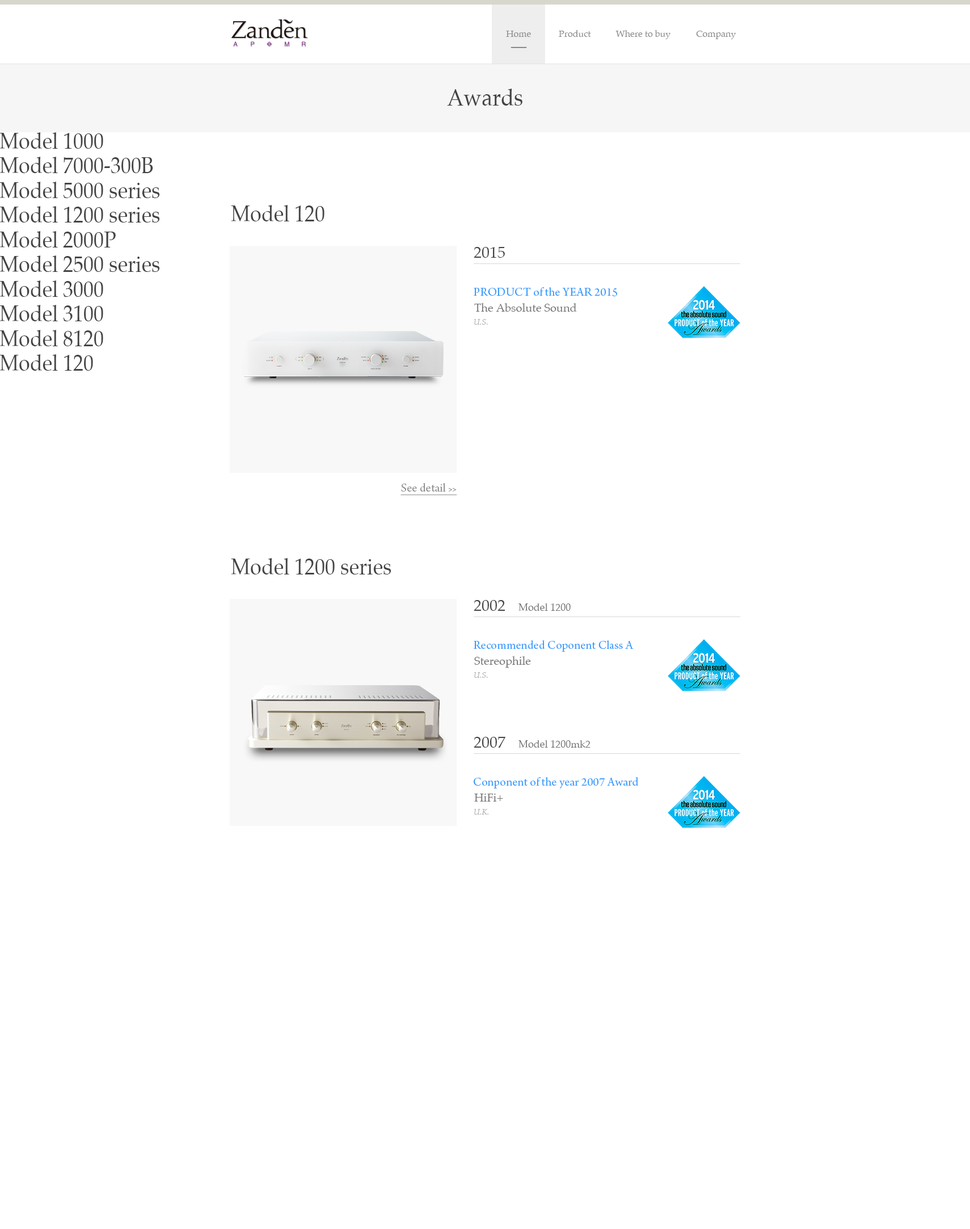
<style>
.page{position:relative;width:970px;height:1229px;background:#ffffff}
.page>*{position:absolute;margin:0}
.t1{font:9.1px "Palatino-Roman";color:#929292}
.t2{font:23.8px "Palatino-Roman";color:#444444;scale:0.9 1}
.t3{font:22.7px "Palatino-Roman";color:#444444;scale:0.9 1}
.t4{font:15.9px "Palatino-Roman";color:#444444}
.t5{font:12.5px "ArnoPro-Regular";color:#3399ff}
.t6{font:11.4px "Palatino-Roman";color:#767575}
.t7{font:7.9px "Palatino-Italic";color:#b2b2b2}
.t8{font:12.5px "ArnoPro-Regular";color:#8a8a8a;text-decoration:underline}
.t9{font:7.9px "ArnoPro-Regular";color:#8a8a8a;text-decoration:underline}
.t10{font:10.2px "Palatino-Roman";color:#767575}
</style>
<div class="page">
<p class="t1" style="left:506px;top:31px;width:25px;height:6px">Home</p>
<p class="t1" style="left:559px;top:30px;width:32px;height:7px">Product</p>
<p class="t1" style="left:616px;top:30px;width:55px;height:9px">Where to buy</p>
<p class="t1" style="left:696px;top:31px;width:41px;height:8px">Company</p>
<p class="t2" style="left:447px;top:89px;width:76px;height:17px">Awards</p>
<p class="t3" style="left:0px;top:132px;width:103px;height:17px">Model 1000</p>
<p class="t3" style="left:0px;top:157px;width:153px;height:16px">Model 7000-300B</p>
<p class="t3" style="left:0px;top:182px;width:160px;height:16px">Model 5000 series</p>
<p class="t3" style="left:0px;top:206px;width:160px;height:16px">Model 1200 series</p>
<p class="t3" style="left:231px;top:205px;width:94px;height:16px">Model 120</p>
<p class="t3" style="left:0px;top:231px;width:116px;height:16px">Model 2000P</p>
<p class="t3" style="left:0px;top:255px;width:160px;height:17px">Model 2500 series</p>
<p class="t4" style="left:474px;top:247px;width:31px;height:11px">2015</p>
<p class="t3" style="left:0px;top:280px;width:103px;height:17px">Model 3000</p>
<p class="t5" style="left:474px;top:287px;width:143px;height:9px">PRODUCT of the YEAR 2015</p>
<p class="t3" style="left:0px;top:305px;width:103px;height:16px">Model 3100</p>
<p class="t6" style="left:474px;top:302px;width:103px;height:10px">The Absolute Sound</p>
<p class="t3" style="left:0px;top:330px;width:103px;height:16px">Model 8120</p>
<p class="t7" style="left:474px;top:319px;width:14px;height:6px">U.S.</p>
<p class="t3" style="left:0px;top:354px;width:93px;height:17px">Model 120</p>
<p class="t8" style="left:401px;top:483px;width:56px;height:12px">See detail <span class="t9">&gt;&gt;</span></p>
<p class="t3" style="left:231px;top:558px;width:161px;height:16px">Model 1200 series</p>
<p class="t4" style="left:474px;top:600px;width:32px;height:11px">2002</p>
<p class="t10" style="left:519px;top:603px;width:52px;height:8px">Model 1200</p>
<p class="t5" style="left:474px;top:640px;width:160px;height:12px">Recommended Coponent Class A</p>
<p class="t6" style="left:474px;top:655px;width:57px;height:13px">Stereophile</p>
<p class="t7" style="left:474px;top:672px;width:14px;height:6px">U.S.</p>
<p class="t4" style="left:474px;top:737px;width:32px;height:10px">2007</p>
<p class="t10" style="left:519px;top:740px;width:72px;height:7px">Model 1200mk2</p>
<p class="t5" style="left:474px;top:777px;width:165px;height:11px">Conponent of the year 2007 Award</p>
<p class="t6" style="left:474px;top:793px;width:29px;height:8px">HiFi+</p>
<p class="t7" style="left:474px;top:809px;width:15px;height:5px">U.K.</p>
</div>
